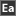
<style>
.page{position:relative;width:16px;height:16px;background:#333333}
.page>*{position:absolute;margin:0}
.t1{font:12px "MyriadPro-Bold";color:#ffffff}
</style>
<div class="page">
<p class="t1" style="left:2px;top:3px;width:12px;height:9px">Ea</p>
</div>
